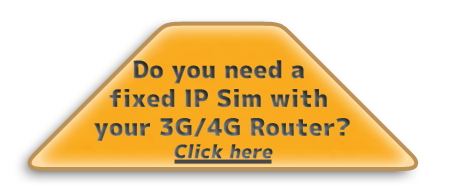
<style>
.page{position:relative;width:449px;height:190px;background:#ffffff}
.page>*{position:absolute;margin:0}
.t1{font:24px "mplus-1p-black"}
.t2{font:18.7px "mplus-1p-black";font-style:italic}
</style>
<div class="page">
<p class="t1" style="left:94px;top:60px;width:256px;height:99px;text-align:center">Do you need a <br>fixed IP Sim with <br>your 3G/4G Router?<br><span class="t2">Click here</span></p>
</div>
